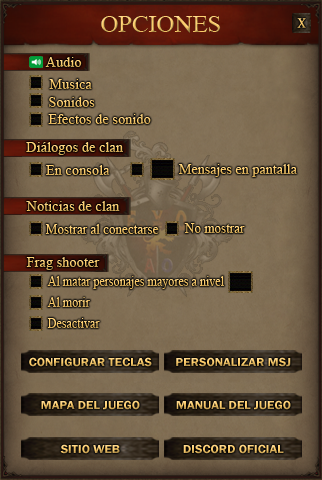
<style>
.page{position:relative;width:322px;height:480px}
.page>*{position:absolute;margin:0}
.t1{font:24px "TimesNewRomanPSMT"}
.t2{font:13.9px "TimesNewRomanPSMT";text-transform:uppercase;font-weight:bold;scale:0.8 1}
.t3{font:14px "TimesNewRomanPSMT"}
.t4{font:14px "TimesNewRomanPSMT";scale:0.94 1}
.t5{font:14px "TimesNewRomanPSMT";scale:0.86 1}
.t6{font:12px "FranklinGothic-Demi";scale:1.07 1}
</style>
<div class="page">
<p class="t1" style="left:101px;top:16px;width:120px;height:17px">OPCIONES</p>
<p class="t2" style="left:297px;top:18px;width:9px;height:10px">X</p>
<p class="t3" style="left:45px;top:57px;width:37px;height:10px">Audio</p>
<p class="t3" style="left:49px;top:79px;width:43px;height:10px">Musica</p>
<p class="t3" style="left:49px;top:97px;width:46px;height:10px">Sonidos</p>
<p class="t3" style="left:48px;top:114px;width:103px;height:10px">Efectos de sonido</p>
<p class="t3" style="left:26px;top:142px;width:97px;height:13px">Diálogos de clan</p>
<p class="t3" style="left:46px;top:165px;width:64px;height:10px">En consola</p>
<p class="t3" style="left:179px;top:164px;width:118px;height:13px">Mensajes en pantalla</p>
<p class="t3" style="left:26px;top:201px;width:94px;height:10px">Noticias de clan</p>
<p class="t4" style="left:45px;top:224px;width:114px;height:10px">Mostrar al conectarse</p>
<p class="t4" style="left:184px;top:223px;width:61px;height:10px">No mostrar</p>
<p class="t3" style="left:26px;top:257px;width:74px;height:13px">Frag shooter</p>
<p class="t5" style="left:47px;top:276px;width:177px;height:13px">Al matar personajes mayores a nivel</p>
<p class="t5" style="left:47px;top:297px;width:43px;height:10px">Al morir</p>
<p class="t5" style="left:47px;top:318px;width:53px;height:10px">Desactivar</p>
<p class="t6" style="left:29px;top:357px;width:123px;height:10px">CONFIGURAR TECLAS</p>
<p class="t6" style="left:176px;top:357px;width:115px;height:10px">PERSONALIZAR MSJ</p>
<p class="t6" style="left:41px;top:400px;width:99px;height:10px">MAPA DEL JUEGO</p>
<p class="t6" style="left:176px;top:400px;width:115px;height:10px">MANUAL DEL JUEGO</p>
<p class="t6" style="left:60px;top:444px;width:60px;height:10px">SITIO WEB</p>
<p class="t6" style="left:183px;top:444px;width:101px;height:10px">DISCORD OFICIAL</p>
</div>
